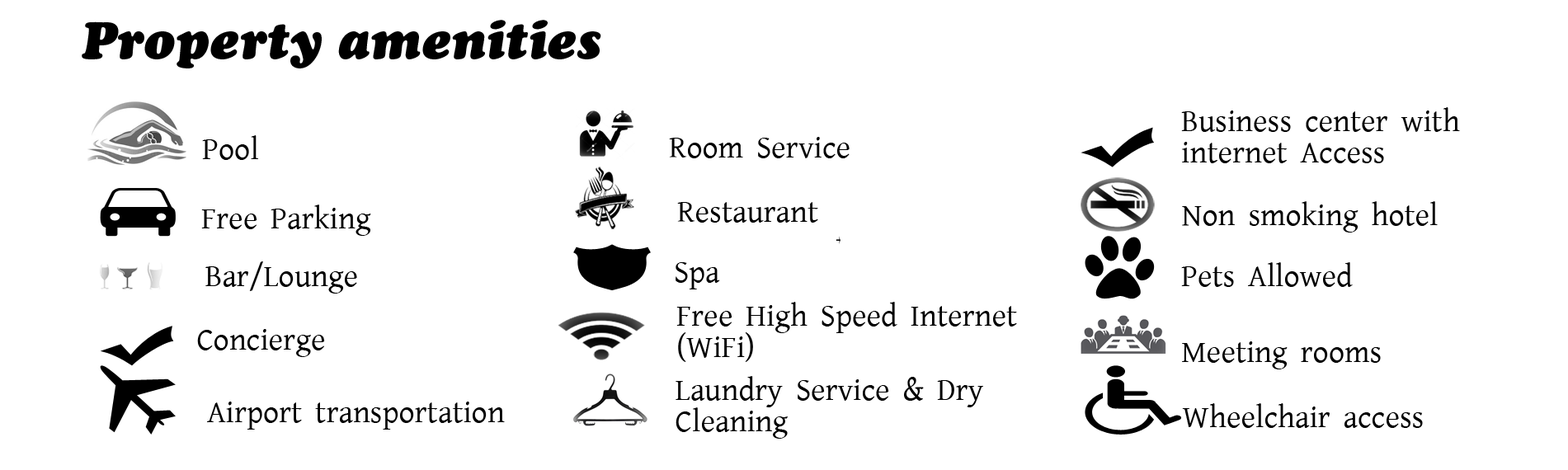
<style>
.page{position:relative;width:1568px;height:470px;background:#ffffff}
.page>*{position:absolute;margin:0}
.t1{font:52.2px "CooperBlackStd-Italic";color:#000000}
.t2{font:26.1px "DinaminaUniWeb";color:#000000}
</style>
<div class="page">
<p class="t1" style="left:82px;top:20px;width:519px;height:48px">Property amenities</p>
<p class="t2" style="left:1181px;top:107px;width:279px;height:56px">Business center with<br>internet Access</p>
<p class="t2" style="left:202px;top:135px;width:56px;height:25px">Pool</p>
<p class="t2" style="left:669px;top:137px;width:181px;height:21px">Room Service</p>
<p class="t2" style="left:201px;top:205px;width:170px;height:31px">Free Parking</p>
<p class="t2" style="left:677px;top:202px;width:141px;height:21px">Restaurant</p>
<p class="t2" style="left:1182px;top:201px;width:256px;height:32px">Non smoking hotel</p>
<p class="t2" style="left:205px;top:261px;width:152px;height:33px">Bar/Lounge</p>
<p class="t2" style="left:676px;top:262px;width:44px;height:28px">Spa</p>
<p class="t2" style="left:1181px;top:262px;width:172px;height:25px">Pets Allowed</p>
<p class="t2" style="left:676px;top:302px;width:341px;height:60px">Free High Speed Internet<br>(WiFi)</p>
<p class="t2" style="left:197px;top:329px;width:128px;height:28px">Concierge</p>
<p class="t2" style="left:1182px;top:341px;width:199px;height:29px">Meeting rooms</p>
<p class="t2" style="left:676px;top:376px;width:307px;height:63px">Laundry Service &amp; Dry <br>Cleaning</p>
<p class="t2" style="left:207px;top:402px;width:298px;height:28px">Airport transportation</p>
<p class="t2" style="left:1182px;top:403px;width:241px;height:25px">Wheelchair access</p>
</div>
